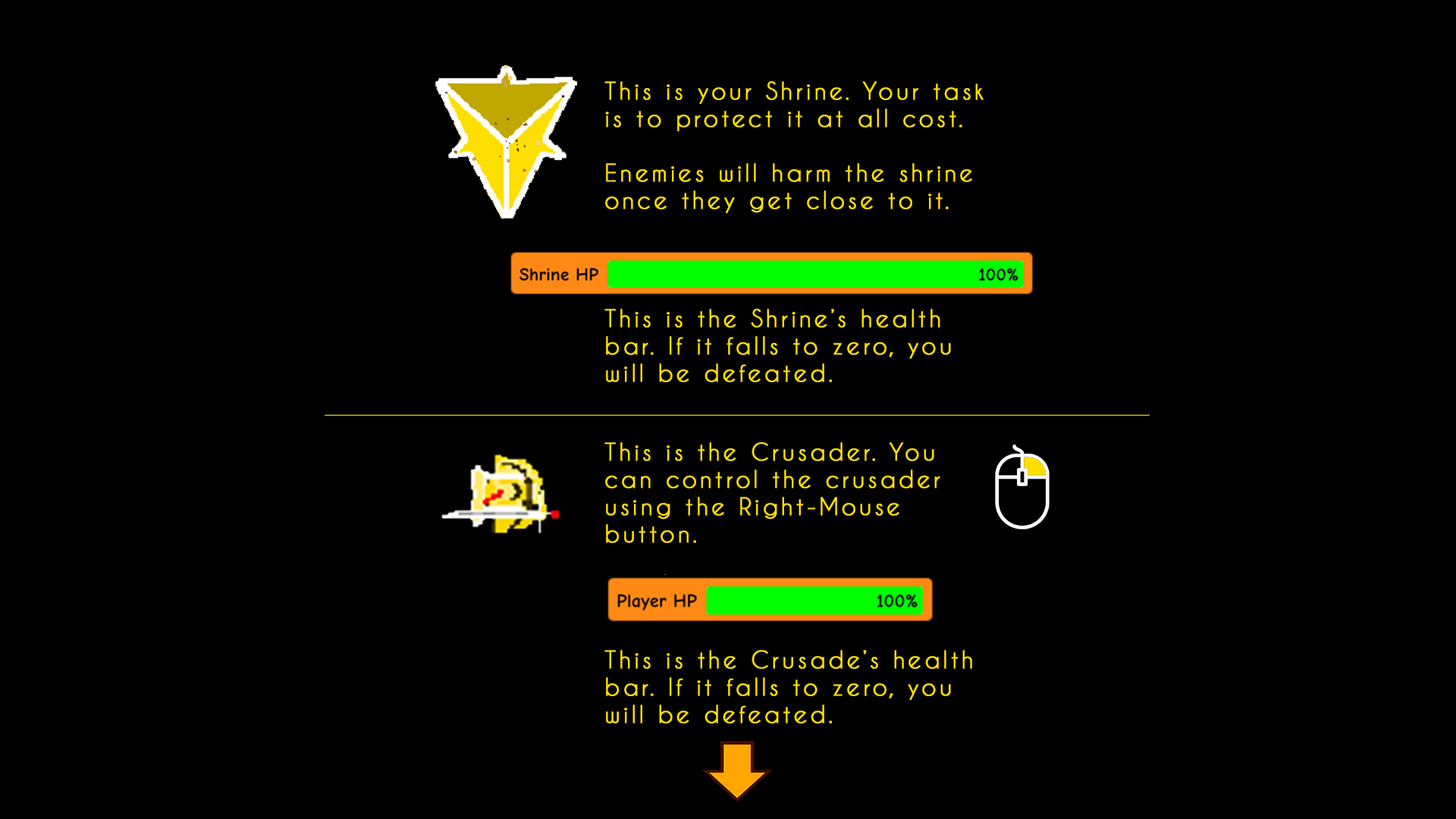
<style>
.page{position:relative;width:1456px;height:819px;background:#000000}
.page>*{position:absolute;margin:0}
.t1{font:22.7px "CaviarDreams";letter-spacing:0.12em;color:#ffdf00;font-weight:bold}
</style>
<div class="page">
<p class="t1" style="left:604px;top:81px;width:380px;height:132px">This is your Shrine. Your task<br>is to protect it at all cost.<br><br>Enemies will harm the shrine<br>once they get close to it.</p>
<p class="t1" style="left:604px;top:309px;width:347px;height:73px">This is the Shrine’s health bar. If it falls to zero, you will be defeated.</p>
<p class="t1" style="left:604px;top:442px;width:336px;height:101px">This is the Crusader. You can control the crusader using the Right-Mouse button.</p>
<p class="t1" style="left:604px;top:650px;width:368px;height:73px">This is the Crusade’s health<br>bar. If it falls to zero, you will be defeated.</p>
</div>
